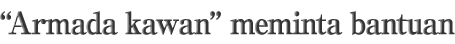
<style>
.page{position:relative;width:455px;height:44px;background:#ffffff}
.page>*{position:absolute;margin:0}
.t1{font:30px "RyuminPro-ExBold";letter-spacing:-0.08em;font-weight:bold}
</style>
<div class="page">
<p class="t1" style="left:0px;top:11px;width:455px;height:24px">“Armada kawan” meminta bantuan</p>
</div>
